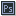
<style>
.page{position:relative;width:16px;height:16px;background:#262f32}
.page>*{position:absolute;margin:0}
.t1{font:11px "Calibri";color:#919cc0}
</style>
<div class="page">
<p class="t1" style="left:4px;top:5px;width:8px;height:7px">Ps</p>
</div>
